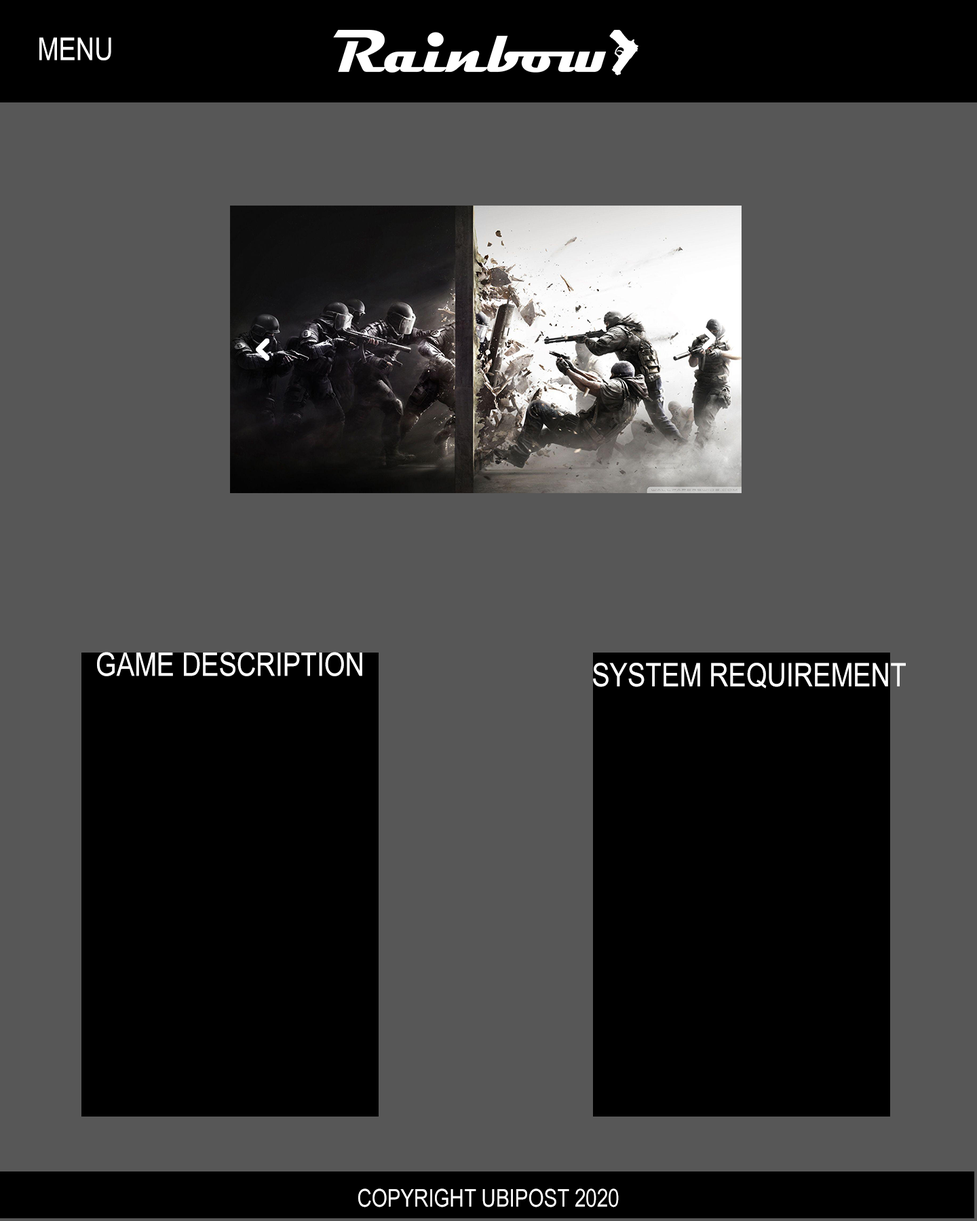
<style>
.page{position:relative;width:977px;height:1221px;background:#575757}
.page>*{position:absolute;margin:0}
.t1{font:31.4px "ArialNarrow";color:#ffffff}
.t2{font:32.6px "ArialNarrow";color:#ffffff}
.t3{font:24.4px "ArialNarrow";color:#ffffff}
</style>
<div class="page">
<p class="t1" style="left:39px;top:37px;width:72px;height:23px">MENU</p>
<p class="t2" style="left:97px;top:652px;width:265px;height:24px">GAME DESCRIPTION</p>
<p class="t2" style="left:593px;top:663px;width:312px;height:25px">SYSTEM REQUIREMENT</p>
<p class="t3" style="left:358px;top:1188px;width:261px;height:19px">COPYRIGHT UBIPOST 2020</p>
</div>
